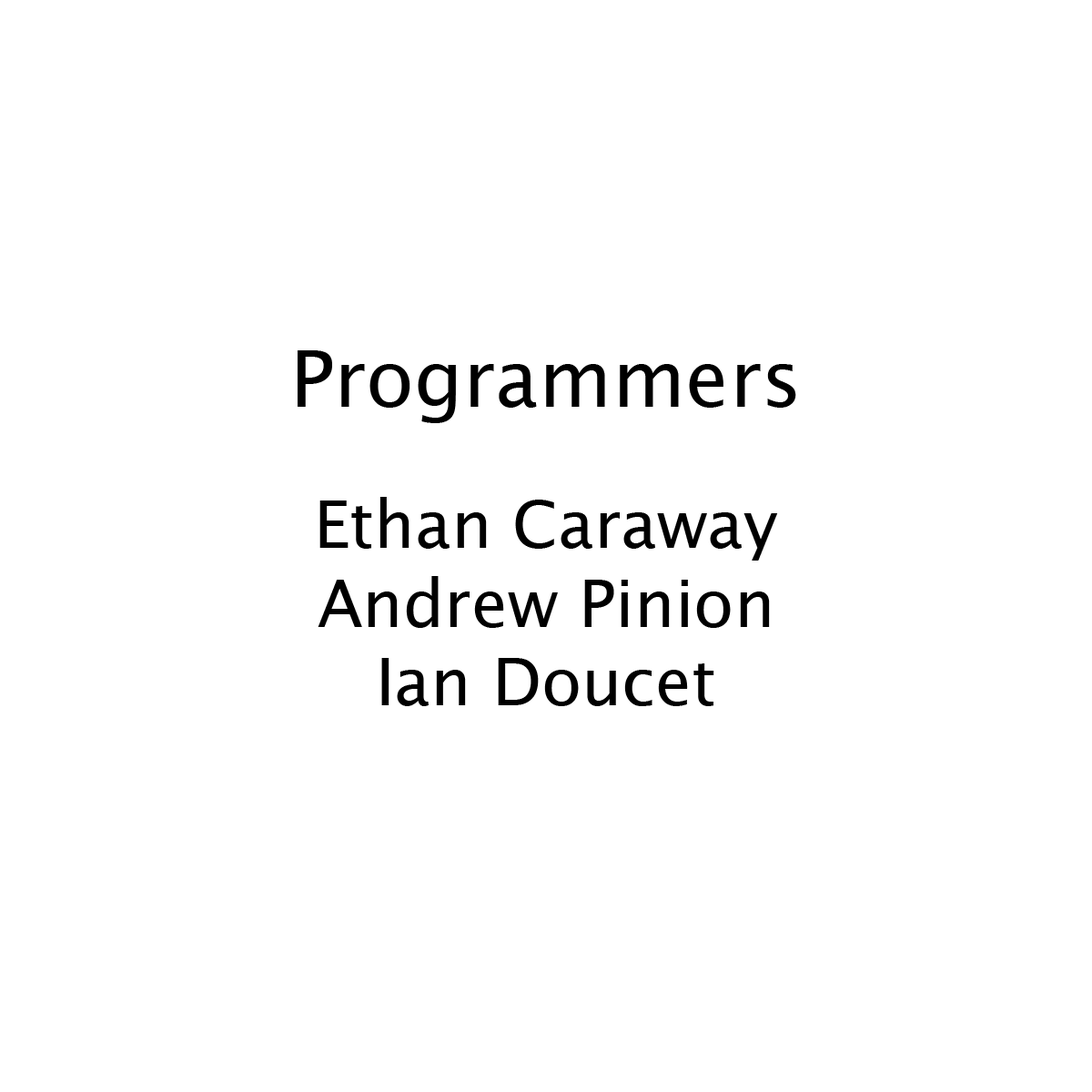
<style>
.page{position:relative;width:1092px;height:1092px;background:#ffffff}
.page>*{position:absolute;margin:0}
.t1{font:65.5px "LucidaGrande";color:#000000}
.t2{font:52.4px "LucidaGrande";color:#000000}
.t3{font:78.6px "LucidaGrande";color:#000000}
</style>
<div class="page">
<p class="t1" style="left:298px;top:350px;width:498px;height:356px;text-align:center"><span class="t2"><br><br><br></span><span class="t3">Programmers<br><br></span>Ethan Caraway<br>Andrew Pinion<br>Ian Doucet</p>
</div>
